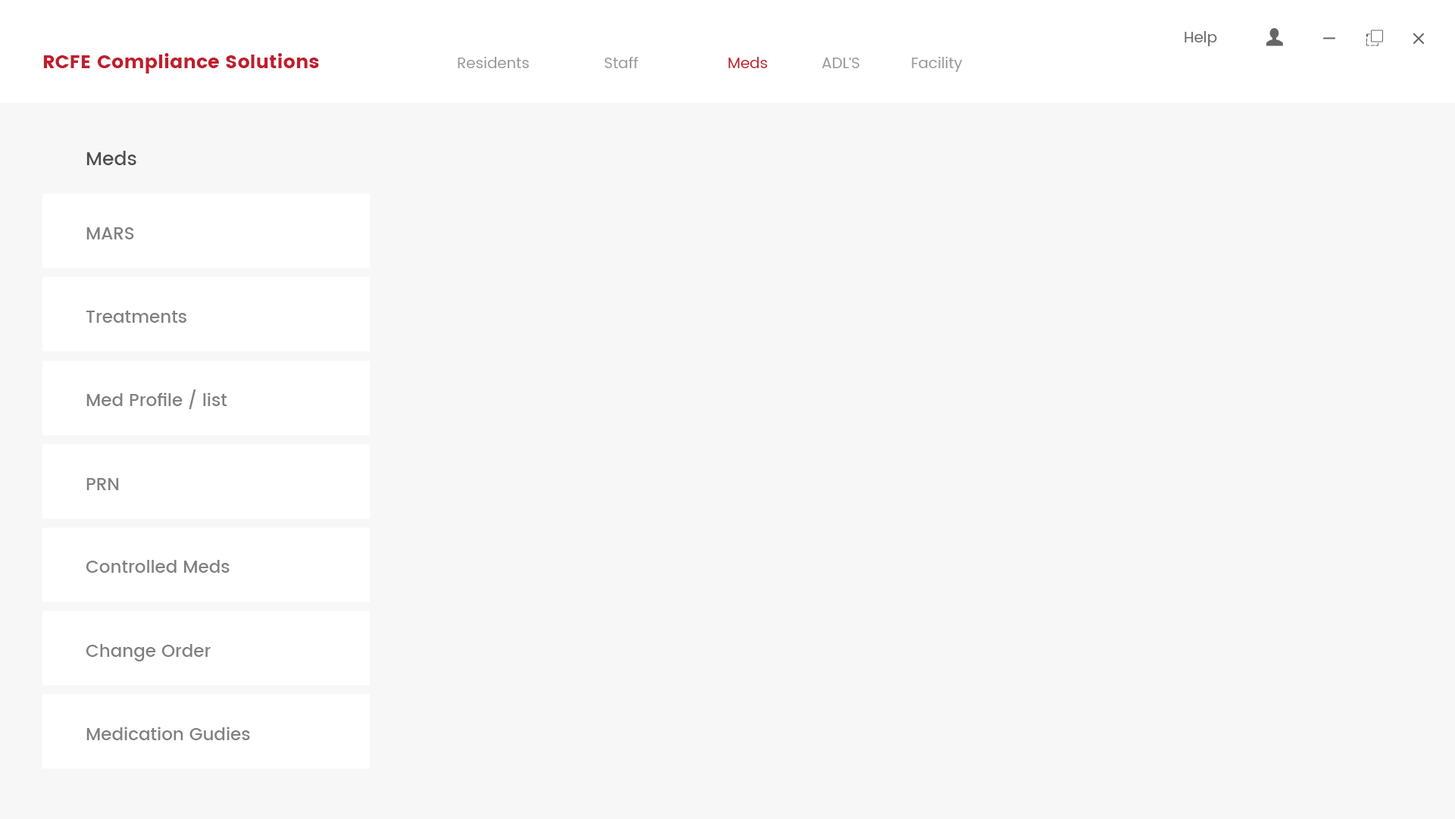
<style>
.page{position:relative;width:1455px;height:819px;background:#f7f7f7}
.page>*{position:absolute;margin:0}
.t1{font:15.2px "Poppins-Regular";color:#666666}
.t2{font:18.9px "Poppins-Bold";color:#bf1e2e}
.t3{font:15.2px "Poppins-Regular";color:#999999}
.t4{font:15.2px "Poppins-Regular";color:#bf1e2e}
.t5{font:18.9px "Poppins-Medium";color:#4d4d4d}
.t6{font:17.4px "Poppins-Medium";color:#808080}
</style>
<div class="page">
<p class="t1" style="left:1185px;top:31px;width:32px;height:15px">Help</p>
<p class="t2" style="left:43px;top:53px;width:276px;height:21px">RCFE Compliance Solutions</p>
<p class="t3" style="left:458px;top:57px;width:71px;height:11px">Residents</p>
<p class="t3" style="left:605px;top:57px;width:33px;height:11px">Staff</p>
<p class="t4" style="left:728px;top:57px;width:40px;height:11px">Meds</p>
<p class="t3" style="left:822px;top:58px;width:38px;height:10px">ADL’S</p>
<p class="t3" style="left:912px;top:57px;width:51px;height:15px">Facility</p>
<p class="t5" style="left:86px;top:151px;width:50px;height:14px">Meds</p>
<p class="t6" style="left:86px;top:227px;width:48px;height:13px">MARS</p>
<p class="t6" style="left:86px;top:311px;width:100px;height:12px">Treatments</p>
<p class="t6" style="left:86px;top:390px;width:141px;height:19px">Med Profile / list</p>
<p class="t6" style="left:86px;top:478px;width:33px;height:12px">PRN</p>
<p class="t6" style="left:86px;top:560px;width:144px;height:13px">Controlled Meds</p>
<p class="t6" style="left:86px;top:644px;width:125px;height:18px">Change Order</p>
<p class="t6" style="left:86px;top:727px;width:164px;height:14px">Medication Gudies</p>
</div>
